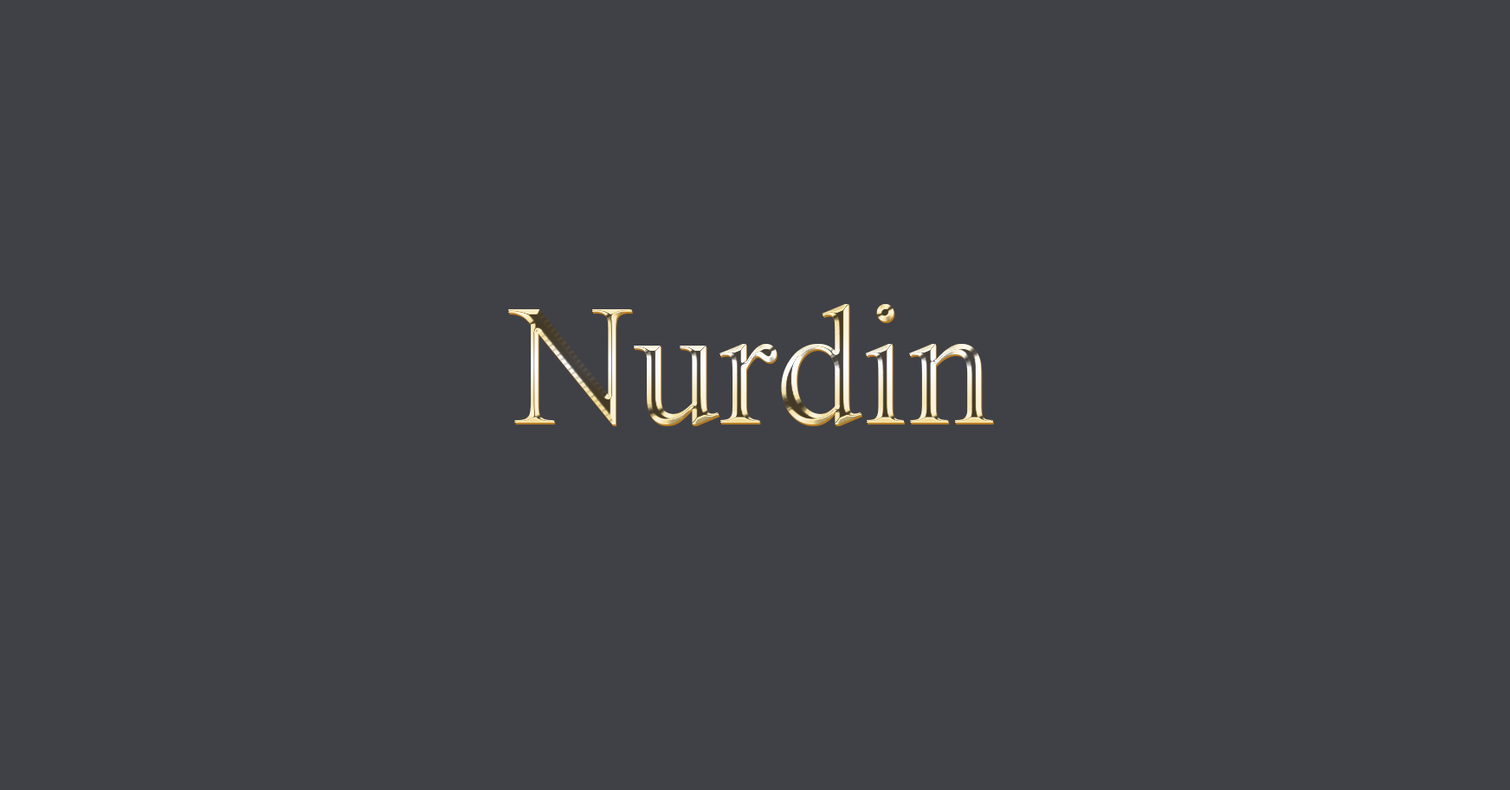
<style>
.page{position:relative;width:1510px;height:790px;background:#404146}
.page>*{position:absolute;margin:0}
.t1{font:170.4px "TimesNewRomanPSMT"}
</style>
<div class="page">
<p class="t1" style="left:508px;top:304px;width:485px;height:121px">Nurdin</p>
<p class="t1" style="left:509px;top:306px;width:485px;height:121px">Nurdin</p>
</div>
